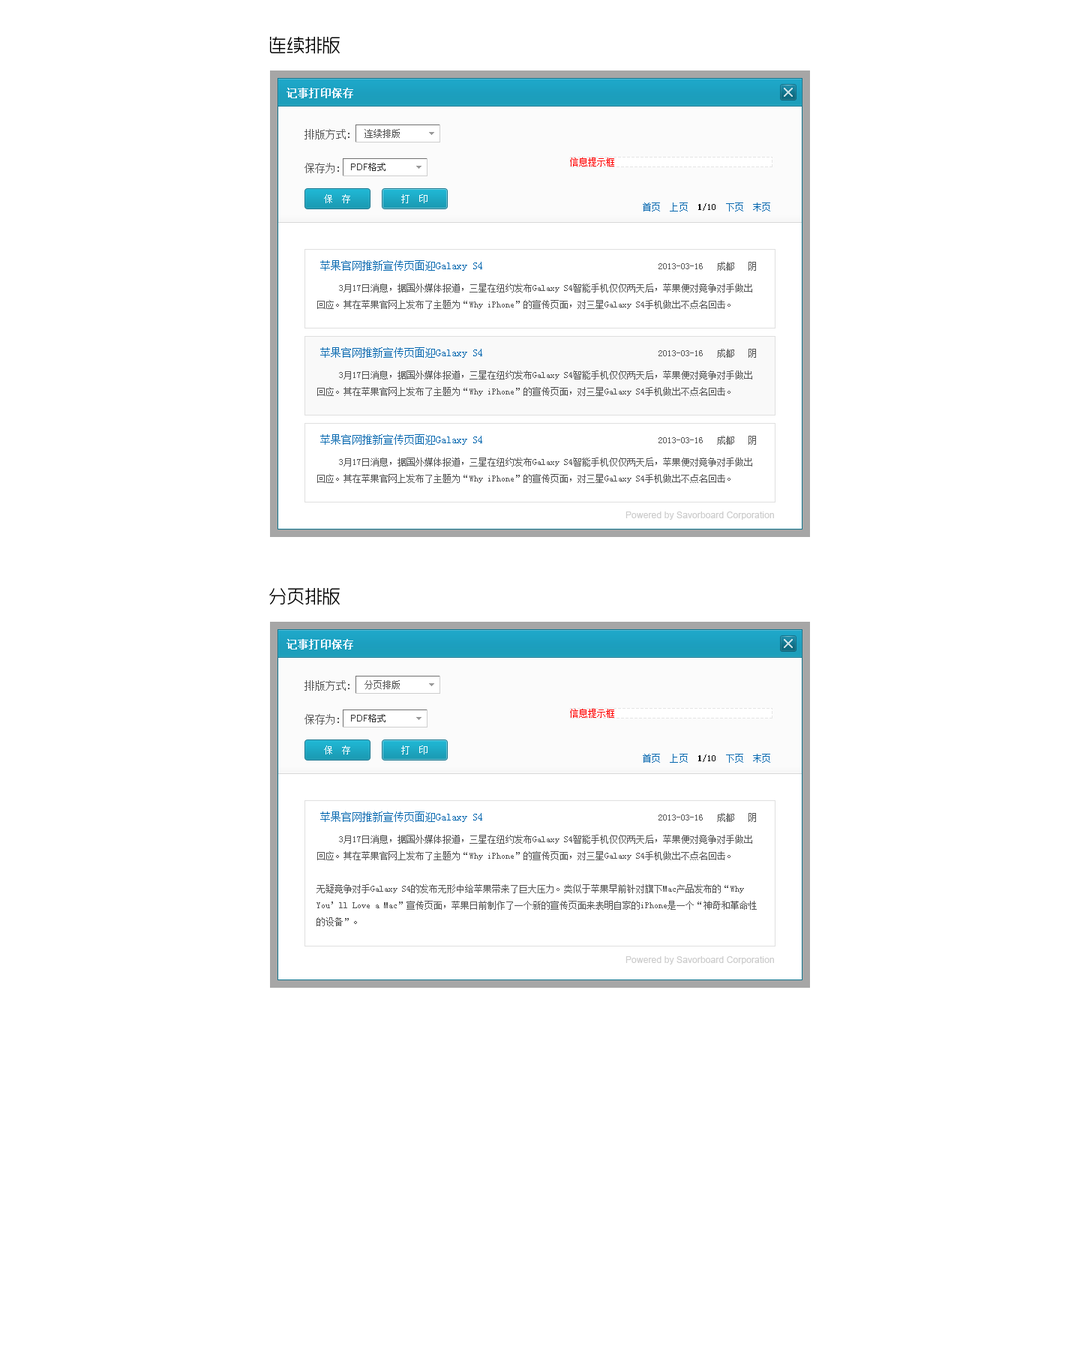
<style>
.page{position:relative;width:1080px;height:1350px;background:#ffffff}
.page>*{position:absolute;margin:0}
.t1{font:18px "RTWSYueGoTrial-Light";color:#000000}
.t2{font:10.5px "SimSun";color:#eef7fe;font-weight:bold}
.t3{font:10.5px "SimSun";color:#555555}
.t4{font:9px "SimSun";color:#555555}
.t5{font:9px "SimSun";color:#ffffff}
.t6{font:9px "SimSun";letter-spacing:0.01em;color:#0869b0}
.t7{font:9px "SimSun";letter-spacing:0.01em;color:#000000;font-weight:bold}
.t8{font:9px "SimSun";letter-spacing:0.01em;color:#000000}
.t9{font:10.5px "SimSun";color:#0869b0}
.t10{font:9px/16.5px "SimSun";color:#555555}
.t11{font:9px "ArialMT";letter-spacing:0.01em;color:#cccccc}
</style>
<div class="page">
<p class="t1" style="left:270px;top:37px;width:70px;height:17px">连续排版</p>
<p class="t2" style="left:286px;top:88px;width:67px;height:10px">记事打印保存</p>
<p class="t3" style="left:304px;top:129px;width:45px;height:10px">排版方式:</p>
<p class="t4" style="left:364px;top:129px;width:36px;height:9px">连续排版</p>
<p class="t3" style="left:304px;top:163px;width:35px;height:10px">保存为:</p>
<p class="t5" style="left:324px;top:194px;width:26px;height:9px">保  存</p>
<p class="t5" style="left:401px;top:194px;width:26px;height:9px">打  印</p>
<p class="t6" style="left:643px;top:202px;width:127px;height:9px">首页  上页  <span class="t7">1</span><span class="t8">/10  </span>下页  末页</p>
<p class="t9" style="left:320px;top:260px;width:436px;height:11px">苹果官网推新宣传页面迎Galaxy S4                              <span class="t4">    2013-03-16   成都   阴</span></p>
<p class="t10" style="left:317px;top:283px;width:435px;height:26px">3月17日消息，据国外媒体报道，三星在纽约发布Galaxy S4智能手机仅仅两天后，苹果便对竞争对手做出回应。其在苹果官网上发布了主题为“Why iPhone”的宣传页面，对三星Galaxy S4手机做出不点名回击。</p>
<p class="t9" style="left:320px;top:347px;width:436px;height:11px">苹果官网推新宣传页面迎Galaxy S4                              <span class="t4">    2013-03-16   成都   阴</span></p>
<p class="t10" style="left:317px;top:370px;width:435px;height:26px">3月17日消息，据国外媒体报道，三星在纽约发布Galaxy S4智能手机仅仅两天后，苹果便对竞争对手做出回应。其在苹果官网上发布了主题为“Why iPhone”的宣传页面，对三星Galaxy S4手机做出不点名回击。</p>
<p class="t9" style="left:320px;top:434px;width:436px;height:11px">苹果官网推新宣传页面迎Galaxy S4                              <span class="t4">    2013-03-16   成都   阴</span></p>
<p class="t10" style="left:317px;top:457px;width:435px;height:26px">3月17日消息，据国外媒体报道，三星在纽约发布Galaxy S4智能手机仅仅两天后，苹果便对竞争对手做出回应。其在苹果官网上发布了主题为“Why iPhone”的宣传页面，对三星Galaxy S4手机做出不点名回击。</p>
<p class="t11" style="left:625px;top:511px;width:149px;height:9px">Powered by Savorboard Corporation</p>
<p class="t1" style="left:269px;top:588px;width:71px;height:17px">分页排版</p>
<p class="t2" style="left:286px;top:639px;width:67px;height:10px">记事打印保存</p>
<p class="t3" style="left:304px;top:680px;width:45px;height:11px">排版方式:</p>
<p class="t4" style="left:364px;top:680px;width:36px;height:9px">分页排版</p>
<p class="t3" style="left:304px;top:714px;width:35px;height:10px">保存为:</p>
<p class="t5" style="left:324px;top:745px;width:26px;height:9px">保  存</p>
<p class="t5" style="left:401px;top:745px;width:26px;height:9px">打  印</p>
<p class="t6" style="left:643px;top:754px;width:127px;height:9px">首页  上页  <span class="t7">1</span><span class="t8">/10  </span>下页  末页</p>
<p class="t9" style="left:320px;top:811px;width:436px;height:11px">苹果官网推新宣传页面迎Galaxy S4                              <span class="t4">    2013-03-16   成都   阴</span></p>
<p class="t10" style="left:316px;top:835px;width:441px;height:91px">3月17日消息，据国外媒体报道，三星在纽约发布Galaxy S4智能手机仅仅两天后，苹果便对竞争对手做出回应。其在苹果官网上发布了主题为“Why iPhone”的宣传页面，对三星Galaxy S4手机做出不点名回击。<br><br>无疑竞争对手Galaxy S4的发布无形中给苹果带来了巨大压力。类似于苹果早前针对旗下Mac产品发布的“Why You’ll Love a Mac”宣传页面，苹果日前制作了一个新的宣传页面来表明自家的iPhone是一个“神奇和革命性的设备”。</p>
<p class="t11" style="left:625px;top:956px;width:149px;height:8px">Powered by Savorboard Corporation</p>
</div>
